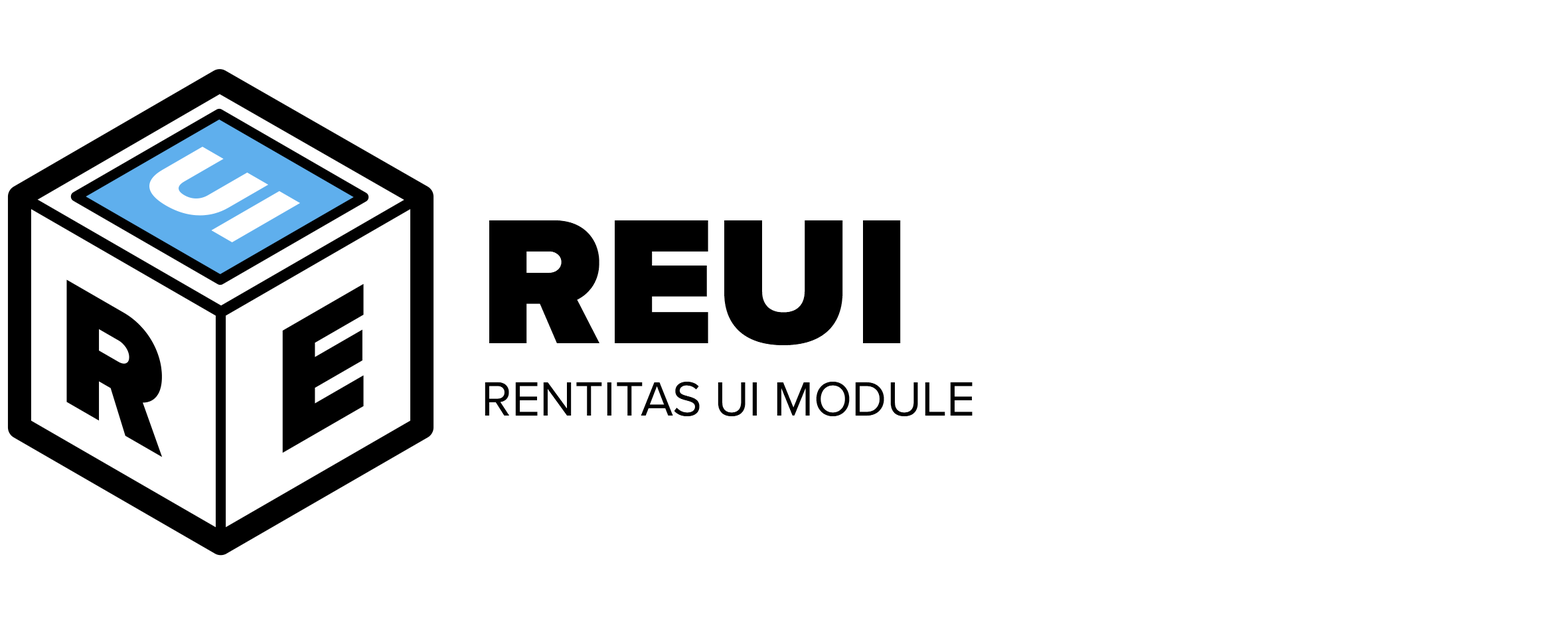
<style>
.page{position:relative;width:1568px;height:624px;background:#ffffff}
.page>*{position:absolute;margin:0}
.t1{font:184.5px "ProximaNova-Black";color:#000000;text-transform:uppercase}
.t2{font:49.7px "ProximaNova-Regular";color:#000000;text-transform:uppercase}
</style>
<div class="page">
<p class="t1" style="left:489px;top:220px;width:412px;height:125px">ReUI</p>
<p class="t2" style="left:485px;top:382px;width:488px;height:35px">Rentitas UI Module</p>
</div>
